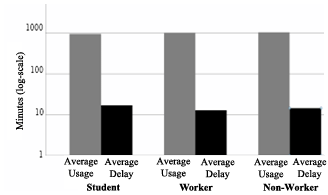
<style>
.page{position:relative;width:328px;height:195px;background:#fefeff}
.page>*{position:absolute;margin:0}
.t1{font:10px "TimesNewRomanPSMT";color:#000000}
.t2{font:10px "TimesNewRomanPS-BoldMT";color:#000000}
</style>
<div class="page">
<p class="t1" style="left:15px;top:52px;width:11px;height:78px;rotate:-90deg">Minutes (log-scale)</p>
<p class="t1" style="left:64px;top:157px;width:34px;height:22px;text-align:center">Average<br>Usage</p>
<p class="t1" style="left:104px;top:158px;width:35px;height:22px;text-align:center">Average<br>Delay</p>
<p class="t1" style="left:156px;top:157px;width:35px;height:22px;text-align:center">Average<br>Usage</p>
<p class="t1" style="left:200px;top:158px;width:35px;height:22px;text-align:center">Average<br>Delay</p>
<p class="t1" style="left:254px;top:158px;width:34px;height:22px;text-align:center">Average<br>Usage</p>
<p class="t1" style="left:292px;top:158px;width:35px;height:22px;text-align:center">Average<br>Delay</p>
<p class="t2" style="left:87px;top:183px;width:33px;height:8px">Student</p>
<p class="t2" style="left:179px;top:183px;width:34px;height:8px">Worker</p>
<p class="t2" style="left:263px;top:183px;width:56px;height:8px">Non-Worker</p>
</div>
